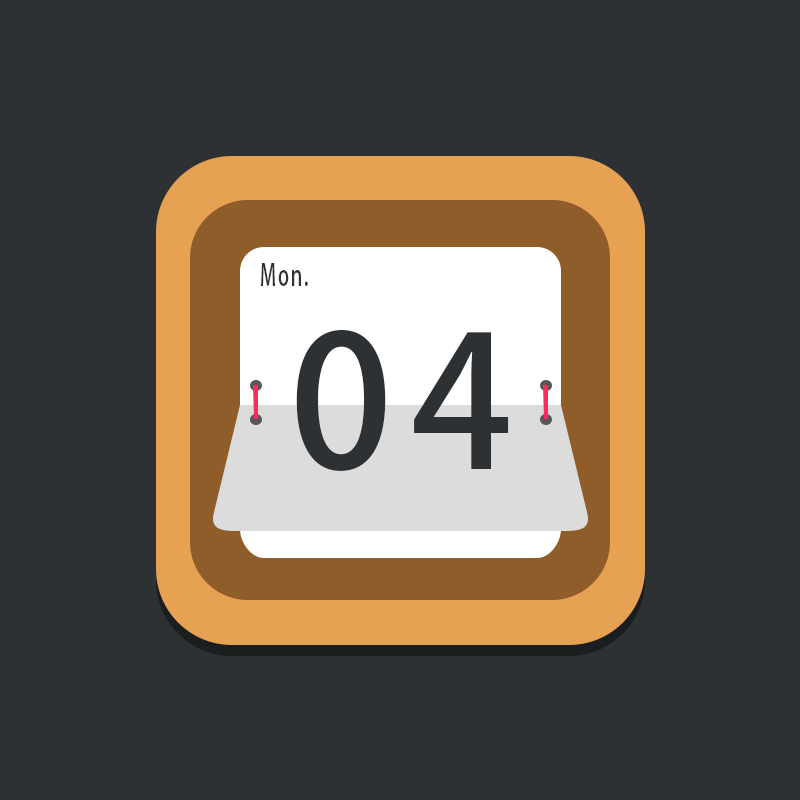
<style>
.page{position:relative;width:800px;height:800px;background:#2d3133}
.page>*{position:absolute;margin:0}
.t1{font:29.2px "AdobeHeitiStd-Regular";letter-spacing:0.1em;color:#2d3133;scale:0.64 1}
.t2{font:181.4px "AdobeHeitiStd-Regular";letter-spacing:0.1em;color:#2d3133}
</style>
<div class="page">
<p class="t1" style="left:261px;top:263px;width:47px;height:23px">Mon.</p>
<p class="t2" style="left:296px;top:329px;width:213px;height:142px">04</p>
</div>
